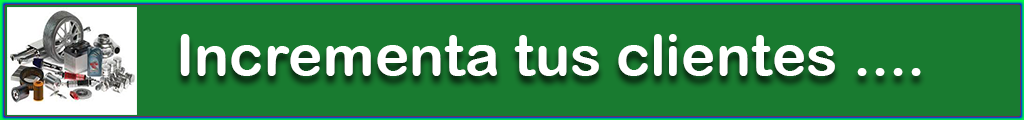
<style>
.page{position:relative;width:1024px;height:120px;background:#197b30}
.page>*{position:absolute;margin:0}
.t1{font:58.3px "ArialRoundedMTBold";color:#ffffff}
</style>
<div class="page">
<p class="t1" style="left:180px;top:34px;width:741px;height:42px">Incrementa tus clientes ....</p>
</div>
